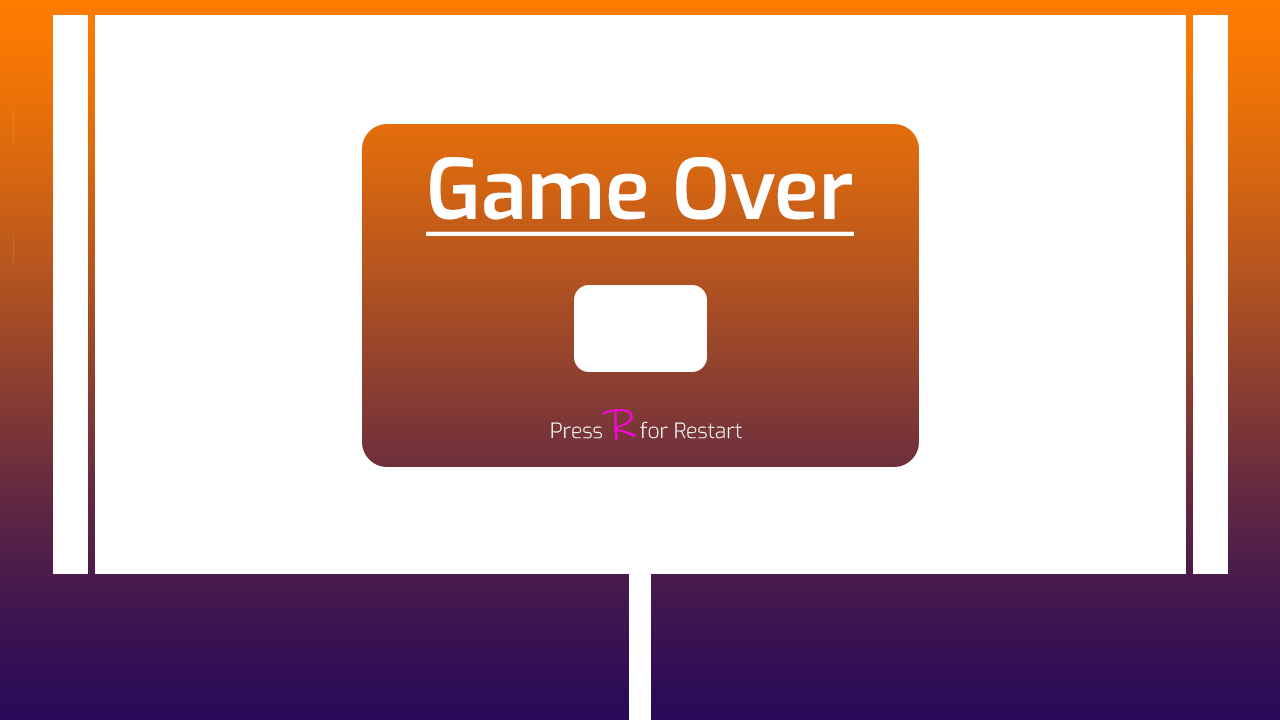
<style>
.page{position:relative;width:1280px;height:720px;background:#ffffff}
.page>*{position:absolute;margin:0}
.t1{font:83.3px "Exo-SemiBold";color:#ffffff;text-decoration:underline}
.t2{font:20.8px "Exo-ExtraLight";color:#ffffff}
.t3{font:41.7px "InkFree";color:#ff00e4}
</style>
<div class="page">
<p class="t1" style="left:426px;top:157px;width:428px;height:79px">Game Over</p>
<p class="t2" style="left:551px;top:409px;width:191px;height:32px">Press <span class="t3">R </span>for Restart</p>
</div>
